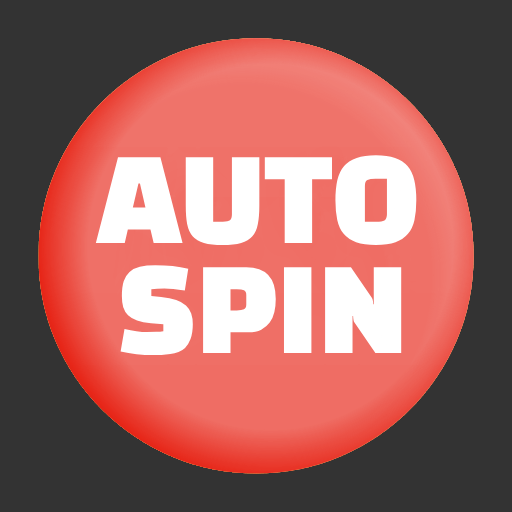
<style>
.page{position:relative;width:512px;height:512px;background:#333333}
.page>*{position:absolute;margin:0}
.t1{font:114.2px/110px "BlackHanSans-Regular";color:#ffffff}
</style>
<div class="page">
<p class="t1" style="left:95px;top:155px;width:322px;height:200px">AUTO<br>SPIN</p>
</div>
